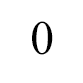
<style>
.page{position:relative;width:83px;height:83px;background:#ffffff}
.page>*{position:absolute;margin:0}
.t1{font:48px "TimesNewRomanPSMT";color:#000000}
</style>
<div class="page">
<p class="t1" style="left:32px;top:21px;width:21px;height:34px">0</p>
</div>
